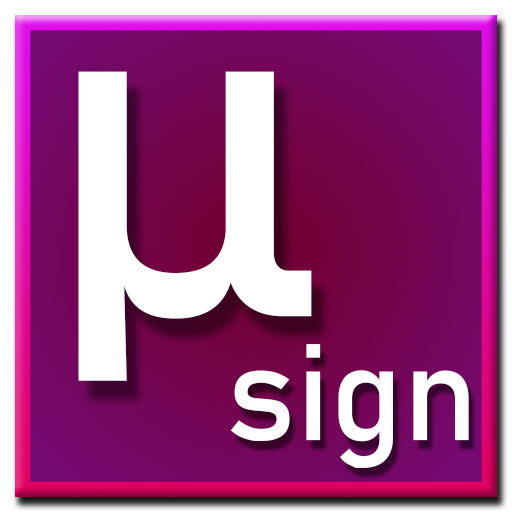
<style>
.page{position:relative;width:512px;height:512px;background:#ffffff}
.page>*{position:absolute;margin:0}
.t1{font:479.8px "Bahnschrift";color:#ffffff}
.t2{font:135.1px "Bahnschrift";color:#ffffff}
</style>
<div class="page">
<p class="t1" style="left:78px;top:71px;width:234px;height:310px">μ</p>
<p class="t2" style="left:230px;top:344px;width:239px;height:124px">sign</p>
</div>
